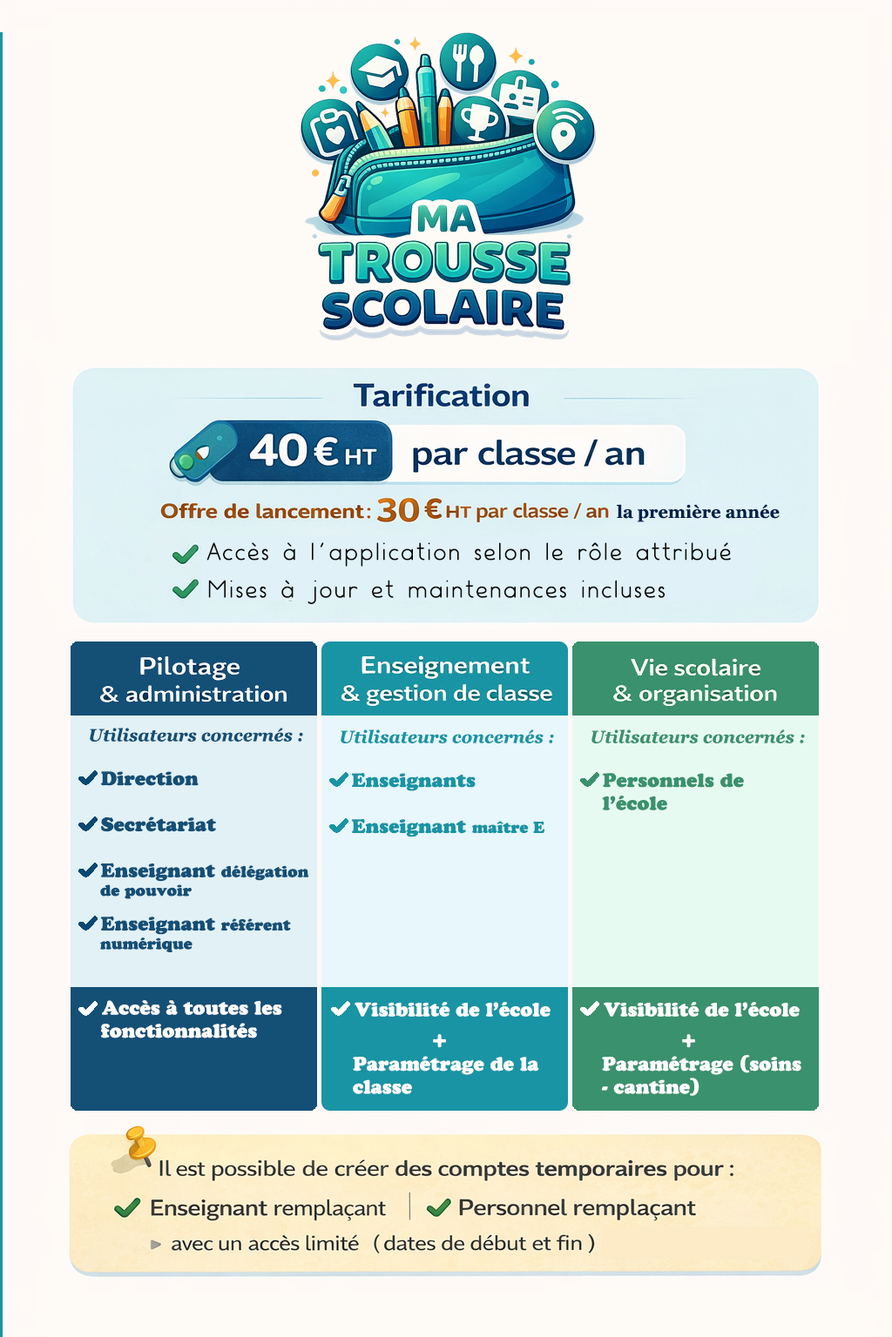
<style>
.page{position:relative;width:892px;height:1337px;background:#fefaf6}
.page>*{position:absolute;margin:0}
.t1{font:17.4px "Georgia-Bold";color:#00214b}
.t2{font:26.1px "Acceseditionsscript-Normal";color:#070707}
.t3{font:19.2px "CooperBlackStd";color:#144f76}
.t4{font:8.7px "Georgia-BoldItalic";color:#144f76}
.t5{font:17.4px "Georgia-BoldItalic";color:#144f76}
.t6{font:15.7px "CooperBlackStd";color:#144f76}
.t7{font:19.2px "CooperBlackStd";color:#1994a4}
.t8{font:8.7px "Georgia-BoldItalic";color:#1994a4}
.t9{font:17.4px "Georgia-BoldItalic";color:#1994a4}
.t10{font:15.7px "CooperBlackStd";color:#1994a4}
.t11{font:19.2px "CooperBlackStd";color:#3a916d}
.t12{font:8.7px "Georgia-BoldItalic";color:#3a916d}
.t13{font:17.4px "Georgia-BoldItalic";color:#3a916d}
.t14{font:19.2px "CooperBlackStd";color:#fcfcfc}
.t15{font:26.1px "CooperBlackStd";color:#fcfcfc}
</style>
<div class="page">
<p class="t1" style="left:616px;top:504px;width:163px;height:18px">la première année</p>
<p class="t2" style="left:206px;top:542px;width:525px;height:62px">Accès à l’application selon le rôle attribué<br> <br>Mises à jour et maintenances incluses</p>
<p class="t3" style="left:90px;top:728px;width:219px;height:225px"><span class="t4">  <br></span><span class="t5">    Utilisateurs concernés :<br><br></span>     Direction<br><br>     Secrétariat<br><br>     Enseignant <span class="t6">délégation<br>      de pouvoir<br> <br></span>     Enseignant <span class="t6">référent <br>      numérique</span></p>
<p class="t7" style="left:340px;top:730px;width:214px;height:108px"><span class="t8">  <br></span><span class="t9">    Utilisateurs concernés :<br><br></span>     Enseignants<br><br>     Enseignant <span class="t10">maître E</span></p>
<p class="t11" style="left:591px;top:730px;width:214px;height:81px"><span class="t12">  <br></span><span class="t13">    Utilisateurs concernés :<br><br></span>     Personnels de <br>     l’école</p>
<p class="t14" style="left:101px;top:1000px;width:181px;height:39px">Accès à toutes les fonctionnalités</p>
<p class="t14" style="left:353px;top:1002px;width:197px;height:92px">Visibilité de l’école            <br>             <span class="t15">+</span>                           Paramétrage de la classe</p>
<p class="t14" style="left:602px;top:1002px;width:199px;height:94px">Visibilité de l’école            <br>             <span class="t15">+</span>                           Paramétrage (soins<br>- cantine)</p>
</div>
